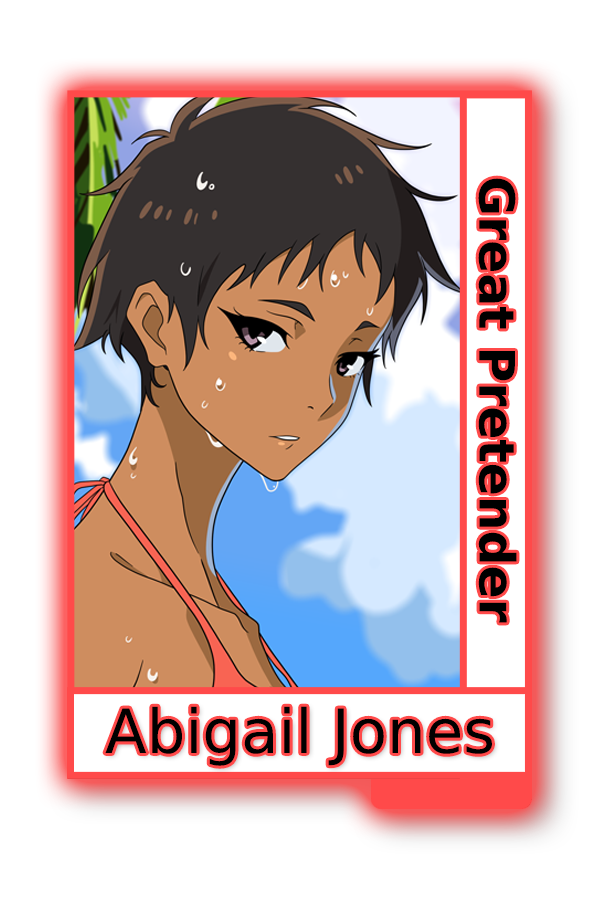
<style>
.page{position:relative;width:600px;height:900px;background:#ffffff}
.page>*{position:absolute;margin:0}
.t1{font:48.8px "MADETOMMY-Bold";color:#000000}
.t2{font:61px "CoolveticaRg-Regular";color:#000000}
</style>
<div class="page">
<p class="t1" style="left:478px;top:178px;width:39px;height:445px;rotate:90deg">Great Pretender</p>
<p class="t2" style="left:105px;top:706px;width:388px;height:60px">Abigail Jones</p>
</div>
